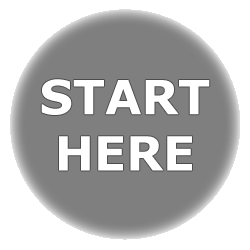
<style>
.page{position:relative;width:250px;height:250px;background:#ffffff}
.page>*{position:absolute;margin:0}
.t1{font:47px "Verdana-Bold";color:#ffffff}
</style>
<div class="page">
<p class="t1" style="left:41px;top:79px;width:169px;height:92px;text-align:center">START <br>HERE</p>
</div>
